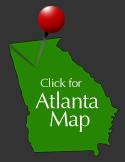
<style>
.page{position:relative;width:125px;height:162px;background:#333333}
.page>*{position:absolute;margin:0}
.t1{font:12px "Optima";letter-spacing:-0.025em;color:#ffffff}
.t2{font:22px/18px "Optima";letter-spacing:-0.025em;color:#ffffff}
</style>
<div class="page">
<p class="t1" style="left:40px;top:78px;width:42px;height:9px">Click for</p>
<p class="t2" style="left:35px;top:91px;width:64px;height:41px;text-align:center">Atlanta <br>Map</p>
</div>
